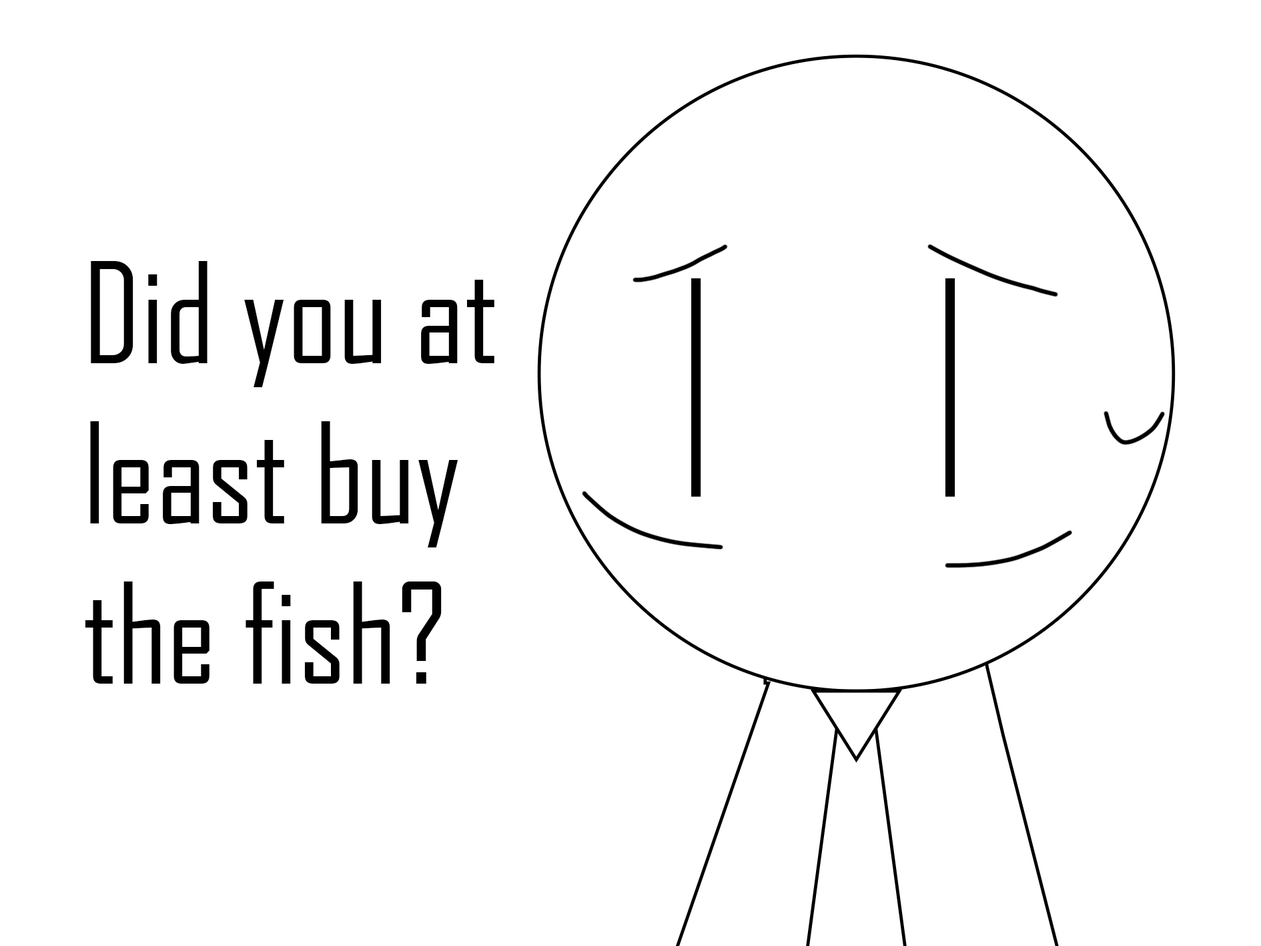
<style>
.page{position:relative;width:1261px;height:946px;background:#ffffff}
.page>*{position:absolute;margin:0}
.t1{font:133.5px "AgencyFB-Reg";color:#000000}
</style>
<div class="page">
<p class="t1" style="left:85px;top:261px;width:409px;height:422px">Did you at least buy the fish?</p>
</div>
